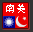
<style>
.page{position:relative;width:33px;height:32px;background:#333333}
.page>*{position:absolute;margin:0}
.t1{font:10.4px "SimSun";color:#ffffff}
</style>
<div class="page">
<p class="t1" style="left:6px;top:4px;width:19px;height:9px">南美</p>
</div>
